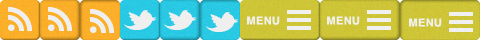
<style>
.page{position:relative;width:480px;height:40px}
.page>*{position:absolute;margin:0}
.t1{font:11px "Helvetica-Bold";letter-spacing:0.03em;color:#f0f0f0}
</style>
<div class="page">
<p class="t1" style="left:247px;top:16px;width:33px;height:9px">MENU</p>
<p class="t1" style="left:327px;top:16px;width:33px;height:9px">MENU</p>
<p class="t1" style="left:409px;top:18px;width:33px;height:9px">MENU</p>
</div>
